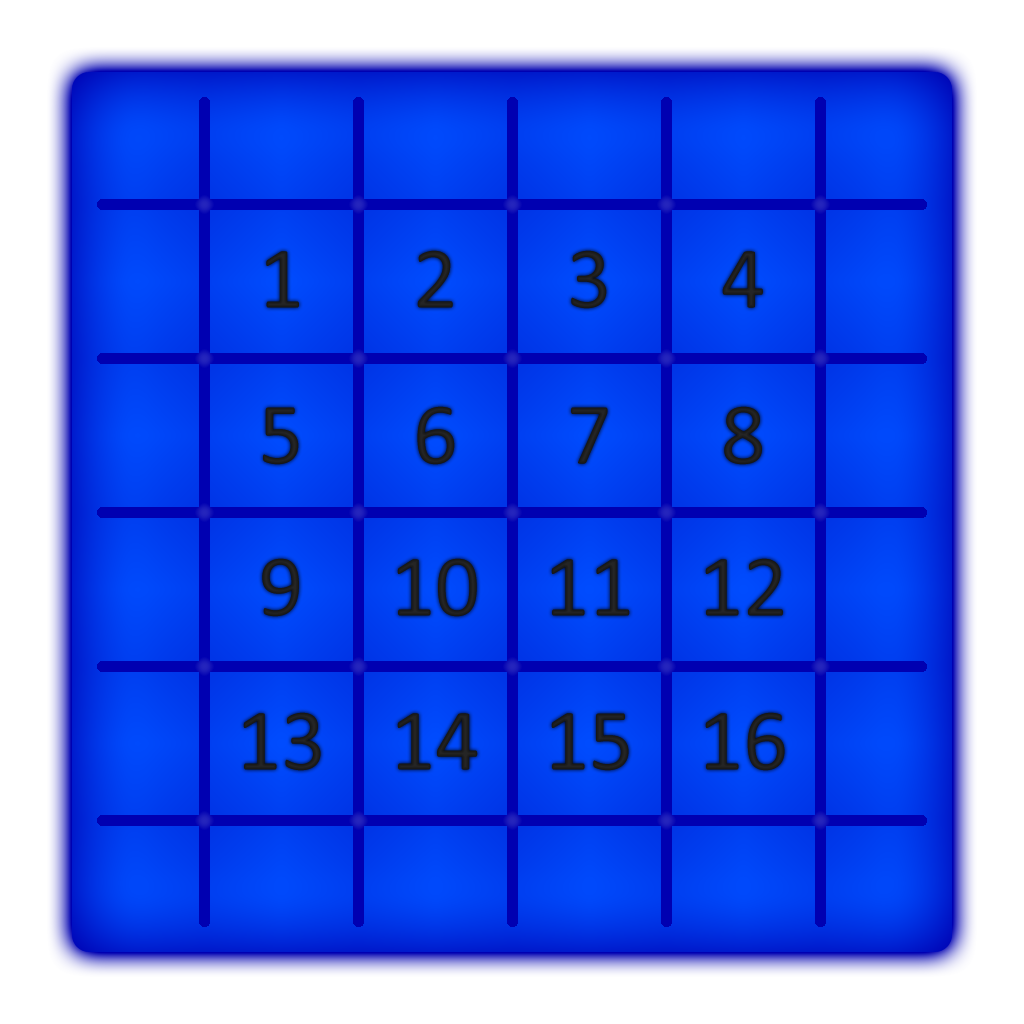
<style>
.page{position:relative;width:1024px;height:1024px}
.page>*{position:absolute;margin:0}
.t1{font:88.5px "Calibri";color:#1d1d1d}
.t2{font:88.5px "Calibri";color:#1e1e1e}
</style>
<div class="page">
<p class="t1" style="left:266px;top:251px;width:33px;height:57px">1</p>
<p class="t2" style="left:417px;top:250px;width:36px;height:58px">2</p>
<p class="t1" style="left:571px;top:250px;width:36px;height:59px">3</p>
<p class="t2" style="left:722px;top:251px;width:41px;height:57px">4</p>
<p class="t1" style="left:263px;top:407px;width:36px;height:58px">5</p>
<p class="t1" style="left:417px;top:406px;width:38px;height:59px">6</p>
<p class="t2" style="left:571px;top:407px;width:37px;height:57px">7</p>
<p class="t2" style="left:724px;top:406px;width:38px;height:59px">8</p>
<p class="t2" style="left:262px;top:558px;width:37px;height:59px">9</p>
<p class="t2" style="left:397px;top:558px;width:80px;height:59px">10</p>
<p class="t2" style="left:705px;top:558px;width:78px;height:58px">12</p>
<p class="t2" style="left:551px;top:559px;width:79px;height:57px">11</p>
<p class="t2" style="left:243px;top:712px;width:78px;height:59px">13</p>
<p class="t2" style="left:397px;top:713px;width:81px;height:57px">14</p>
<p class="t2" style="left:551px;top:713px;width:78px;height:58px">15</p>
<p class="t2" style="left:705px;top:712px;width:80px;height:59px">16</p>
</div>
